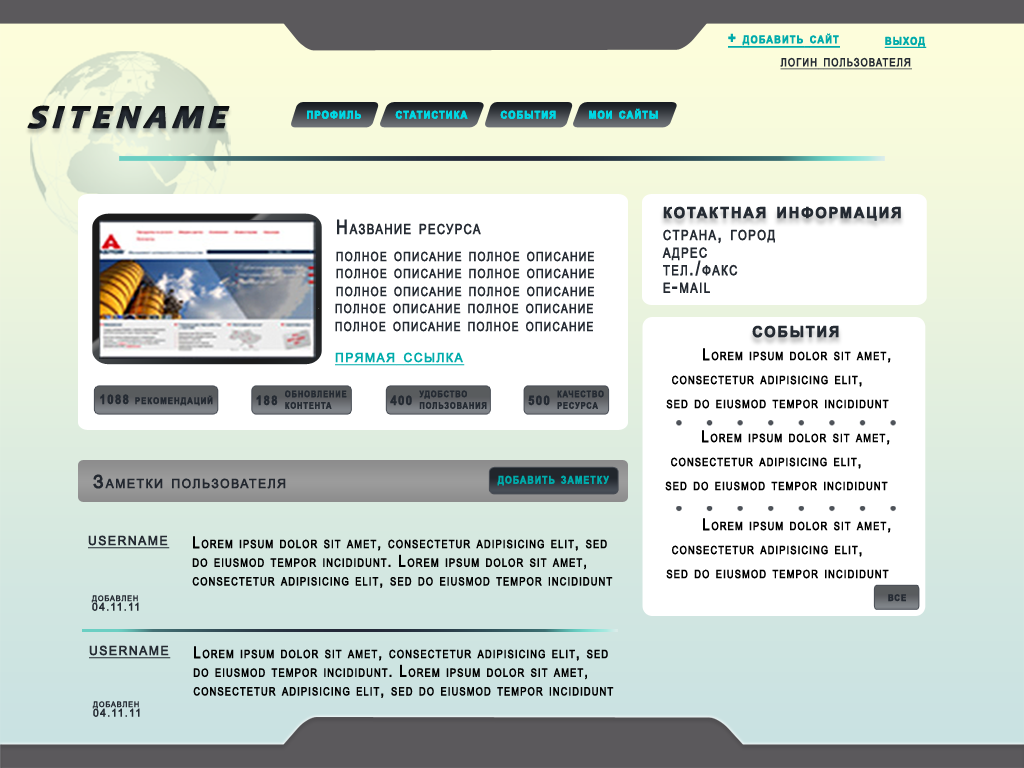
<style>
.page{position:relative;width:1024px;height:768px;background:#ffffff}
.page>*{position:absolute;margin:0}
.t1{font:15.3px "Arial-BoldMT";letter-spacing:0.1em;color:#00abab;font-variant:small-caps;font-weight:bold;text-decoration:underline;scale:0.86 1}
.t2{font:16.2px "ArialMT";letter-spacing:0.1em;color:#252b33;font-variant:small-caps;font-weight:bold;text-decoration:underline;scale:0.81 1}
.t3{font:40px "Candara-BoldItalic";letter-spacing:0.1em;color:#252b33;font-variant:small-caps;font-weight:bold;font-style:italic}
.t4{font:15.3px "Arial-BoldMT";letter-spacing:0.1em;color:#00d7e3;font-variant:small-caps;font-weight:bold;scale:0.86 1}
.t5{font:21.6px "Arial-BoldMT";letter-spacing:0.1em;color:#252b33;font-variant:small-caps;font-weight:bold;scale:0.96 1}
.t6{font:19.8px "ArialMT";letter-spacing:0.1em;color:#252b33;font-variant:small-caps;font-weight:bold;scale:0.81 1}
.t7{font:18px "ArialMT";letter-spacing:0.1em;color:#252b33;font-variant:small-caps;font-weight:bold;scale:0.81 1}
.t8{font:18px "ArialMT";letter-spacing:0.1em;color:#00abab;font-variant:small-caps;font-weight:bold;text-decoration:underline;scale:0.96 1}
.t9{font:16.2px/24px "ArialMT";letter-spacing:0.1em;color:#000000;font-variant:small-caps;font-weight:bold;scale:0.81 1}
.t10{font:16.2px "ArialMT";letter-spacing:0.1em;color:#000000;font-variant:small-caps;font-weight:bold;scale:0.81 1}
.t11{font:13px "Arial-BoldMT";letter-spacing:0.1em;color:#252b33;font-variant:small-caps;font-weight:bold;scale:0.81 1}
.t12{font:13px "Arial-BoldMT";letter-spacing:0.1em;color:#252b33;font-variant:small-caps;font-weight:bold;scale:0.86 1}
.t13{font:18px "ArialMT";letter-spacing:0.1em;color:#232830;font-variant:small-caps;font-weight:bold;scale:0.96 1}
.t14{font:15.3px "Arial-BoldMT";letter-spacing:0.1em;color:#00abab;font-variant:small-caps;font-weight:bold;scale:0.81 1}
.t15{font:18px "ArialMT";letter-spacing:0.1em;color:#252b33;font-variant:small-caps;font-weight:bold;text-decoration:underline;scale:0.96 1}
.t16{font:16.2px/18.7px "ArialMT";letter-spacing:0.1em;color:#000000;font-variant:small-caps;font-weight:bold;scale:0.81 1}
.t17{font:10.8px "ArialMT";letter-spacing:0.1em;color:#252b33;font-variant:small-caps;font-weight:bold;scale:0.96 1}
</style>
<div class="page">
<p class="t1" style="left:728px;top:33px;width:112px;height:15px">+ добавить сайт</p>
<p class="t1" style="left:884px;top:36px;width:43px;height:12px">выход</p>
<p class="t2" style="left:780px;top:57px;width:132px;height:13px">логин пользователя</p>
<p class="t3" style="left:27px;top:105px;width:203px;height:24px">sitename</p>
<p class="t4" style="left:307px;top:110px;width:54px;height:9px">профиль</p>
<p class="t4" style="left:307px;top:110px;width:54px;height:9px">профиль</p>
<p class="t4" style="left:395px;top:110px;width:73px;height:9px">статистика</p>
<p class="t4" style="left:395px;top:110px;width:73px;height:9px">статистика</p>
<p class="t4" style="left:500px;top:110px;width:56px;height:9px">события</p>
<p class="t4" style="left:500px;top:110px;width:56px;height:9px">события</p>
<p class="t4" style="left:589px;top:108px;width:69px;height:11px">мои сайты</p>
<p class="t4" style="left:589px;top:108px;width:69px;height:11px">мои сайты</p>
<p class="t5" style="left:663px;top:206px;width:238px;height:15px">котактная информация</p>
<p class="t6" style="left:337px;top:219px;width:144px;height:16px">Название ресурса</p>
<p class="t6" style="left:662px;top:229px;width:113px;height:64px">страна, город<br>адрес<br>тел./факс<br>e-mail</p>
<p class="t7" style="left:336px;top:251px;width:258px;height:11px">полное описание полное описание</p>
<p class="t7" style="left:336px;top:268px;width:258px;height:11px">полное описание полное описание</p>
<p class="t7" style="left:336px;top:286px;width:258px;height:11px">полное описание полное описание</p>
<p class="t7" style="left:335px;top:303px;width:258px;height:11px">полное описание полное описание</p>
<p class="t7" style="left:335px;top:321px;width:258px;height:11px">полное описание полное описание</p>
<p class="t5" style="left:752px;top:325px;width:87px;height:13px">события</p>
<p class="t8" style="left:335px;top:352px;width:130px;height:14px">прямая ссылка</p>
<p class="t9" style="left:666px;top:348px;width:225px;height:61px"><span class="t10"> </span>Lorem ipsum dolor sit amet,<br> consectetur adipisicing elit, <br>sed do eiusmod tempor incididunt</p>
<p class="t11" style="left:285px;top:390px;width:62px;height:19px">обновление<br>контента</p>
<p class="t11" style="left:419px;top:390px;width:68px;height:19px">удобство<br>пользования</p>
<p class="t11" style="left:557px;top:390px;width:47px;height:19px">качество<br>ресурса</p>
<p class="t12" style="left:100px;top:394px;width:113px;height:12px">1088 рекомендаций</p>
<p class="t12" style="left:256px;top:395px;width:22px;height:11px">188</p>
<p class="t12" style="left:390px;top:395px;width:22px;height:11px">400</p>
<p class="t12" style="left:528px;top:395px;width:22px;height:11px">500</p>
<p class="t9" style="left:665px;top:430px;width:225px;height:61px"><span class="t10"> </span>Lorem ipsum dolor sit amet,<br> consectetur adipisicing elit, <br>sed do eiusmod tempor incididunt</p>
<p class="t13" style="left:93px;top:474px;width:193px;height:15px">Заметки пользователя</p>
<p class="t14" style="left:497px;top:475px;width:112px;height:11px">добавить заметку</p>
<p class="t9" style="left:666px;top:518px;width:225px;height:61px"><span class="t10"> </span>Lorem ipsum dolor sit amet,<br> consectetur adipisicing elit, <br>sed do eiusmod tempor incididunt</p>
<p class="t15" style="left:88px;top:535px;width:82px;height:14px">username</p>
<p class="t16" style="left:192px;top:536px;width:421px;height:52px">Lorem ipsum dolor sit amet, consectetur adipisicing elit, sed <br> do eiusmod tempor incididunt. Lorem ipsum dolor sit amet, <br> consectetur adipisicing elit, sed do eiusmod tempor incididunt</p>
<p class="t17" style="left:91px;top:595px;width:48px;height:16px">добавлен<br>04.11.11</p>
<p class="t12" style="left:888px;top:594px;width:18px;height:8px">все</p>
<p class="t15" style="left:89px;top:645px;width:82px;height:14px">username</p>
<p class="t16" style="left:193px;top:646px;width:421px;height:52px">Lorem ipsum dolor sit amet, consectetur adipisicing elit, sed <br> do eiusmod tempor incididunt. Lorem ipsum dolor sit amet, <br> consectetur adipisicing elit, sed do eiusmod tempor incididunt</p>
<p class="t17" style="left:92px;top:701px;width:48px;height:16px">добавлен<br>04.11.11</p>
</div>
